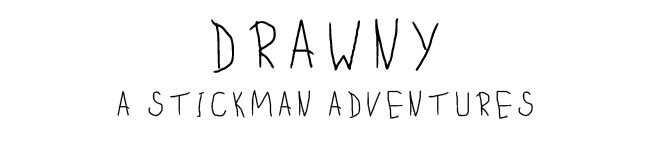
<style>
.page{position:relative;width:650px;height:146px;background:#ffffff}
.page>*{position:absolute;margin:0}
.t1{font:60px "ChildWriting-Regular";letter-spacing:0.14em;color:#000000;text-transform:uppercase}
.t2{font:30px "ChildWriting-Regular";letter-spacing:0.14em;color:#000000;text-transform:uppercase}
</style>
<div class="page">
<p class="t1" style="left:211px;top:18px;width:228px;height:55px">Drawny</p>
<p class="t2" style="left:117px;top:90px;width:416px;height:29px">a stickman adventures</p>
</div>
